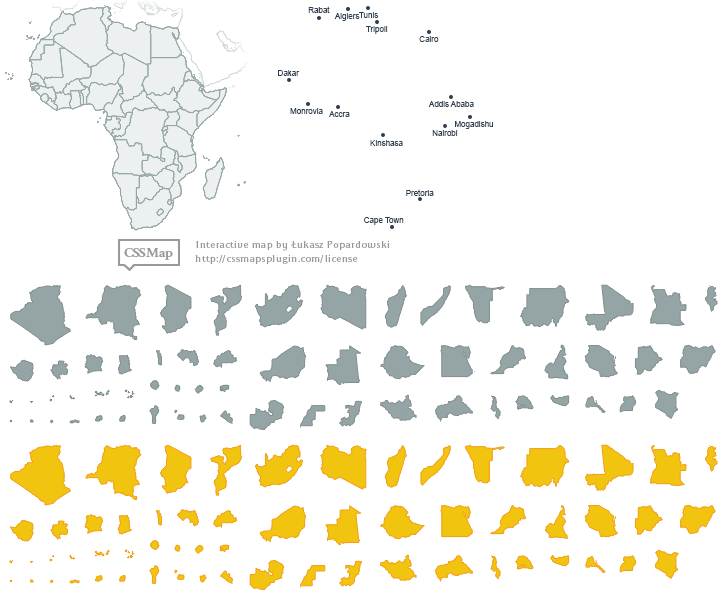
<style>
.page{position:relative;width:728px;height:600px;background:#ffffff}
.page>*{position:absolute;margin:0}
.t1{font:8px "ArialMT";color:#2c3e50}
</style>
<div class="page">
<p class="t1" style="left:308px;top:6px;width:22px;height:7px">Rabat</p>
<p class="t1" style="left:334px;top:13px;width:26px;height:8px">Algiers</p>
<p class="t1" style="left:359px;top:12px;width:20px;height:6px">Tunis</p>
<p class="t1" style="left:366px;top:26px;width:22px;height:8px">Tripoli</p>
<p class="t1" style="left:419px;top:36px;width:20px;height:6px">Cairo</p>
<p class="t1" style="left:278px;top:70px;width:22px;height:6px">Dakar</p>
<p class="t1" style="left:428px;top:101px;width:46px;height:6px">Addis Ababa</p>
<p class="t1" style="left:290px;top:108px;width:33px;height:6px">Monrovia</p>
<p class="t1" style="left:329px;top:111px;width:21px;height:6px">Accra</p>
<p class="t1" style="left:455px;top:121px;width:38px;height:8px">Mogadishu</p>
<p class="t1" style="left:432px;top:130px;width:26px;height:6px">Nairobi</p>
<p class="t1" style="left:370px;top:140px;width:33px;height:6px">Kinshasa</p>
<p class="t1" style="left:406px;top:189px;width:28px;height:7px">Pretoria</p>
<p class="t1" style="left:364px;top:217px;width:40px;height:8px">Cape Town</p>
</div>
